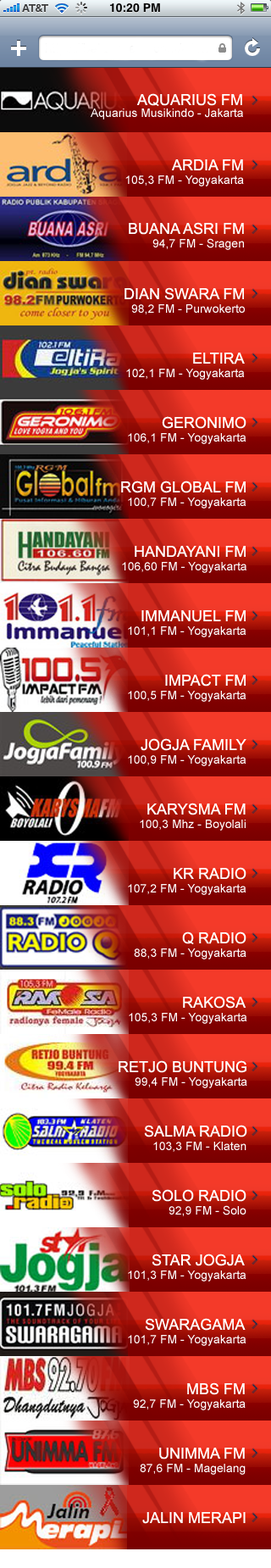
<style>
.page{position:relative;width:271px;height:1568px}
.page>*{position:absolute;margin:0}
.t1{font:15.3px "ArialMT";color:#ffffff}
.t2{font:11.9px "ArialMT";color:#ffffff}
</style>
<div class="page">
<p class="t1" style="left:136px;top:93px;width:106px;height:14px">AQUARIUS FM</p>
<p class="t2" style="left:91px;top:108px;width:152px;height:12px">Aquarius Musikindo - Jakarta</p>
<p class="t1" style="left:171px;top:159px;width:72px;height:11px">ARDIA FM</p>
<p class="t2" style="left:125px;top:175px;width:119px;height:11px">105,3 FM - Yogyakarta</p>
<p class="t1" style="left:129px;top:222px;width:115px;height:13px">BUANA ASRI FM</p>
<p class="t2" style="left:153px;top:238px;width:91px;height:12px">94,7 FM - Sragen</p>
<p class="t1" style="left:125px;top:287px;width:119px;height:13px">DIAN SWARA FM</p>
<p class="t2" style="left:131px;top:304px;width:114px;height:10px">98,2 FM - Purwokerto</p>
<p class="t1" style="left:193px;top:353px;width:52px;height:11px">ELTIRA</p>
<p class="t2" style="left:126px;top:369px;width:119px;height:11px">102,1 FM - Yogyakarta</p>
<p class="t1" style="left:162px;top:416px;width:85px;height:13px">GERONIMO</p>
<p class="t2" style="left:128px;top:433px;width:119px;height:11px">106,1 FM - Yogyakarta</p>
<p class="t1" style="left:121px;top:481px;width:125px;height:12px">RGM GLOBAL FM</p>
<p class="t2" style="left:128px;top:498px;width:119px;height:11px">100,7 FM - Yogyakarta</p>
<p class="t1" style="left:135px;top:546px;width:111px;height:11px">HANDAYANI FM</p>
<p class="t2" style="left:122px;top:562px;width:125px;height:11px">106,60 FM - Yogyakarta</p>
<p class="t1" style="left:142px;top:610px;width:104px;height:12px">IMMANUEL FM</p>
<p class="t2" style="left:128px;top:626px;width:119px;height:11px">101,1 FM - Yogyakarta</p>
<p class="t1" style="left:165px;top:674px;width:81px;height:13px">IMPACT FM</p>
<p class="t2" style="left:128px;top:691px;width:119px;height:11px">100,5 FM - Yogyakarta</p>
<p class="t1" style="left:141px;top:738px;width:106px;height:13px">JOGJA FAMILY</p>
<p class="t2" style="left:128px;top:755px;width:119px;height:11px">100,9 FM - Yogyakarta</p>
<p class="t1" style="left:147px;top:803px;width:99px;height:12px">KARYSMA FM</p>
<p class="t2" style="left:140px;top:820px;width:106px;height:11px">100,3 Mhz - Boyolali</p>
<p class="t1" style="left:174px;top:867px;width:73px;height:13px">KR RADIO</p>
<p class="t2" style="left:128px;top:884px;width:119px;height:11px">107,2 FM - Yogyakarta</p>
<p class="t1" style="left:182px;top:931px;width:65px;height:14px">Q RADIO</p>
<p class="t2" style="left:134px;top:948px;width:113px;height:11px">88,3 FM - Yogyakarta</p>
<p class="t1" style="left:183px;top:996px;width:64px;height:13px">RAKOSA</p>
<p class="t2" style="left:129px;top:1013px;width:118px;height:11px">105,3 FM - Yogyakarta</p>
<p class="t1" style="left:119px;top:1060px;width:128px;height:13px">RETJO BUNTUNG</p>
<p class="t2" style="left:135px;top:1077px;width:112px;height:11px">99,4 FM - Yogyakarta</p>
<p class="t1" style="left:144px;top:1125px;width:103px;height:12px">SALMA RADIO</p>
<p class="t2" style="left:153px;top:1142px;width:94px;height:10px">103,3 FM - Klaten</p>
<p class="t1" style="left:152px;top:1189px;width:95px;height:13px">SOLO RADIO</p>
<p class="t2" style="left:169px;top:1205px;width:78px;height:11px">92,9 FM - Solo</p>
<p class="t1" style="left:152px;top:1254px;width:93px;height:12px">STAR JOGJA</p>
<p class="t2" style="left:128px;top:1271px;width:119px;height:11px">101,3 FM - Yogyakarta</p>
<p class="t1" style="left:145px;top:1318px;width:101px;height:13px">SWARAGAMA</p>
<p class="t2" style="left:128px;top:1335px;width:119px;height:11px">101,7 FM - Yogyakarta</p>
<p class="t1" style="left:187px;top:1382px;width:58px;height:13px">MBS FM</p>
<p class="t2" style="left:133px;top:1399px;width:113px;height:11px">92,7 FM - Yogyakarta</p>
<p class="t1" style="left:159px;top:1448px;width:86px;height:12px">UNIMMA FM</p>
<p class="t2" style="left:140px;top:1464px;width:106px;height:11px">87,6 FM - Magelang</p>
<p class="t1" style="left:142px;top:1512px;width:104px;height:12px">JALIN MERAPI</p>
</div>
